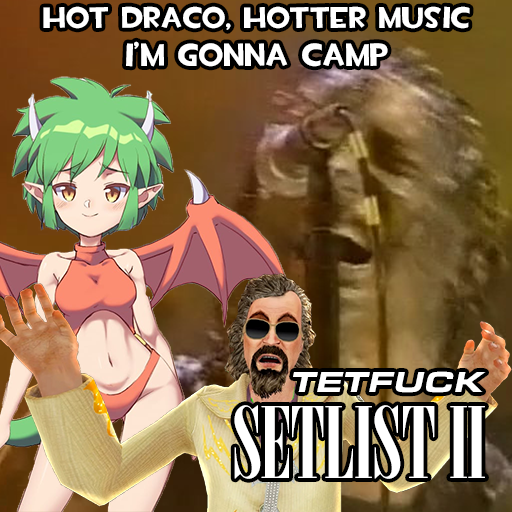
<style>
.page{position:relative;width:512px;height:512px}
.page>*{position:absolute;margin:0}
.t1{font:30px "TF2Build";color:#ffffff}
.t2{font:32px "TF2Build";color:#ffffff}
.t3{font:30px "EurostileExt-BlaIta";color:#ffffff}
.t4{font:98px "Nirvana";color:#ffffff}
</style>
<div class="page">
<p class="t1" style="left:43px;top:6px;width:427px;height:24px">HOT DRACO, HOTTER MUSIC</p>
<p class="t2" style="left:126px;top:41px;width:262px;height:26px">I’M GONNA CAMP</p>
<p class="t3" style="left:293px;top:371px;width:193px;height:22px">TETFUCK</p>
<p class="t4" style="left:234px;top:405px;width:251px;height:74px">SETLIST II</p>
</div>
